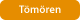
<style>
.page{position:relative;width:80px;height:20px;background:#e68d00}
.page>*{position:absolute;margin:0}
.t1{font:11px "MyriadPro-Semibold";color:#ffffff}
</style>
<div class="page">
<p class="t1" style="left:19px;top:5px;width:42px;height:8px">Tömören</p>
</div>
